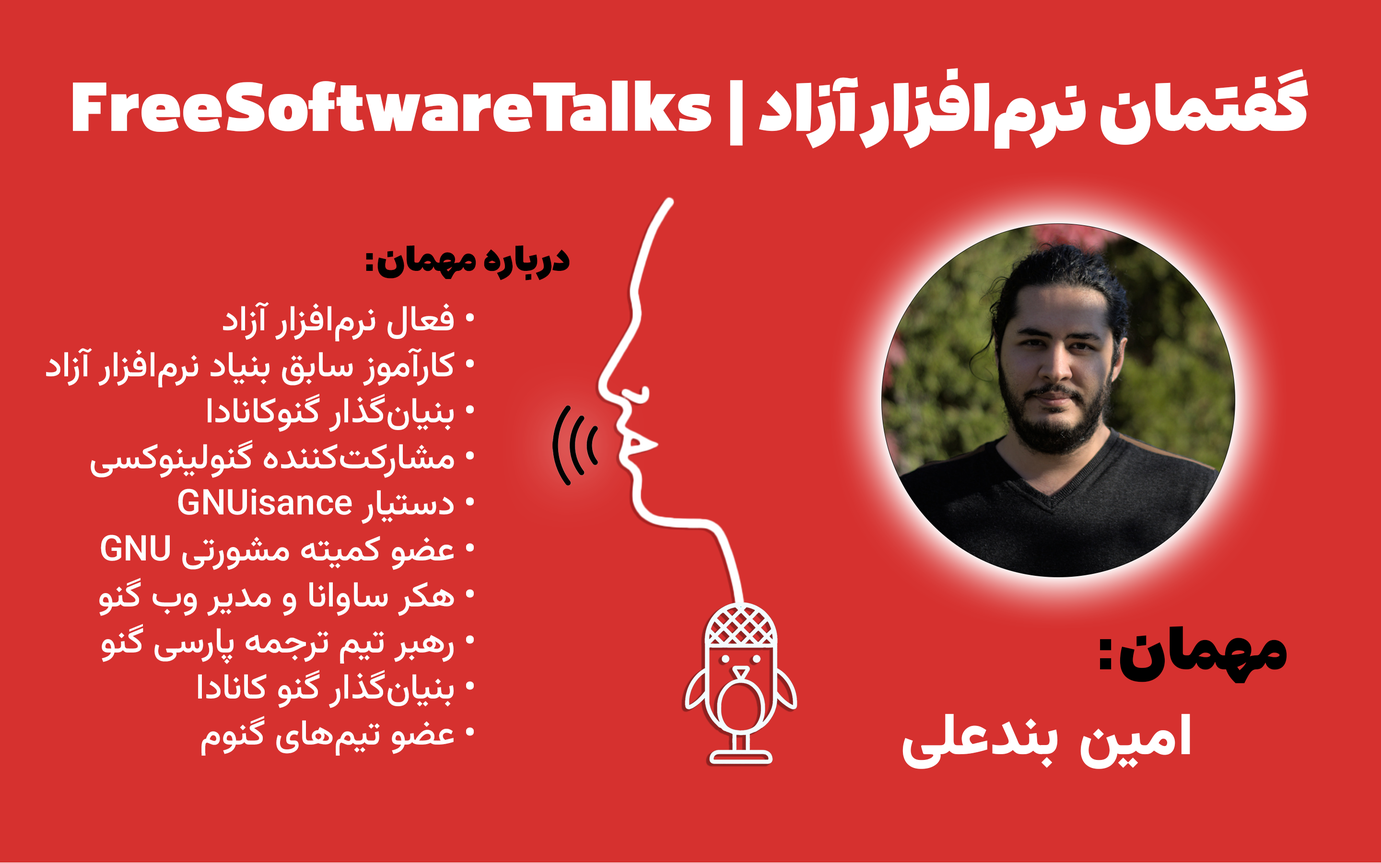
<style>
.page{position:relative;width:1381px;height:863px;background:#d6312f}
.page>*{position:absolute;margin:0}
.t1{font:65.2px "EstedadMad-Fat";letter-spacing:0.01em;color:#ffffff}
.t2{font:34.5px "EstedadMad-Fat";letter-spacing:0.01em;color:#000000}
.t3{font:35.5px/46px "Vazirmatn-Medium";color:#ffffff}
.t4{font:58.5px "EstedadMad-Fat";letter-spacing:0.01em;color:#000000}
.t5{font:58.5px "Vazirmatn-Black";letter-spacing:0.01em;color:#ffffff}
</style>
<div class="page">
<p class="t1" style="left:73px;top:68px;width:1235px;height:81px">گفتمان نرم‌افزار آزاد | FreeSoftwareTalks</p>
<p class="t2" style="left:366px;top:246px;width:204px;height:35px">درباره مهمان:</p>
<p class="t3" style="left:46px;top:302px;width:428px;height:454px">فعال نرم‌افزار آزاد<br>کارآموز سابق بنیاد نرم‌افزار آزاد<br>بنیان‌گذار گنوکانادا<br>مشارکت‌کننده گنولینوکسی<br>دستیار GNUisance<br>عضو کمیته مشورتی GNU<br>هکر ساوانا و مدیر وب گنو<br>رهبر تیم ترجمه پارسی گنو<br>بنیان‌گذار گنو کانادا<br>عضو تیم‌های گنوم</p>
<p class="t4" style="left:1100px;top:626px;width:187px;height:57px">مهمان:</p>
<p class="t5" style="left:903px;top:714px;width:287px;height:55px">امین بندعلی</p>
</div>
